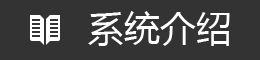
<style>
.page{position:relative;width:260px;height:60px;background:#333333}
.page>*{position:absolute;margin:0}
.t1{font:36px "MicrosoftYaHei";color:#ffffff}
</style>
<div class="page">
<p class="t1" style="left:88px;top:11px;width:142px;height:35px">系统介绍</p>
</div>
